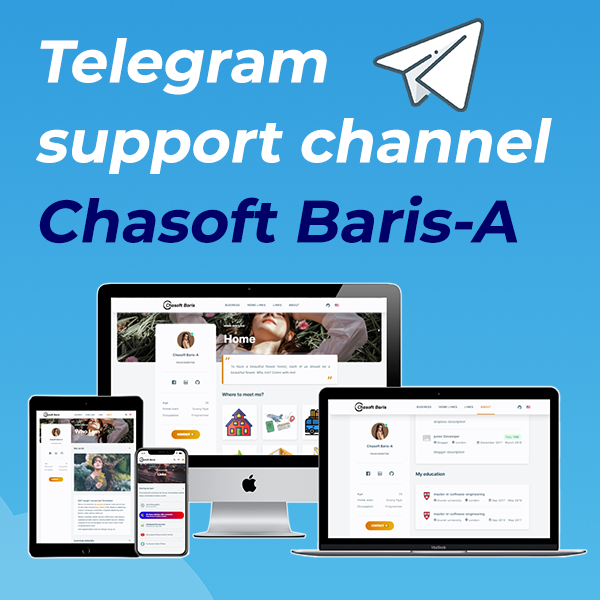
<style>
.page{position:relative;width:600px;height:600px}
.page>*{position:absolute;margin:0}
.t1{font:59.5px/80px "Montserrat-Bold";color:#ffffff;font-style:italic}
.t2{font:59.5px/80px "Montserrat-Bold";color:#000068;font-style:italic}
</style>
<div class="page">
<p class="t1" style="left:36px;top:38px;width:516px;height:206px">Telegram<br>support channel<br><span class="t2">Chasoft Baris-A</span></p>
</div>
